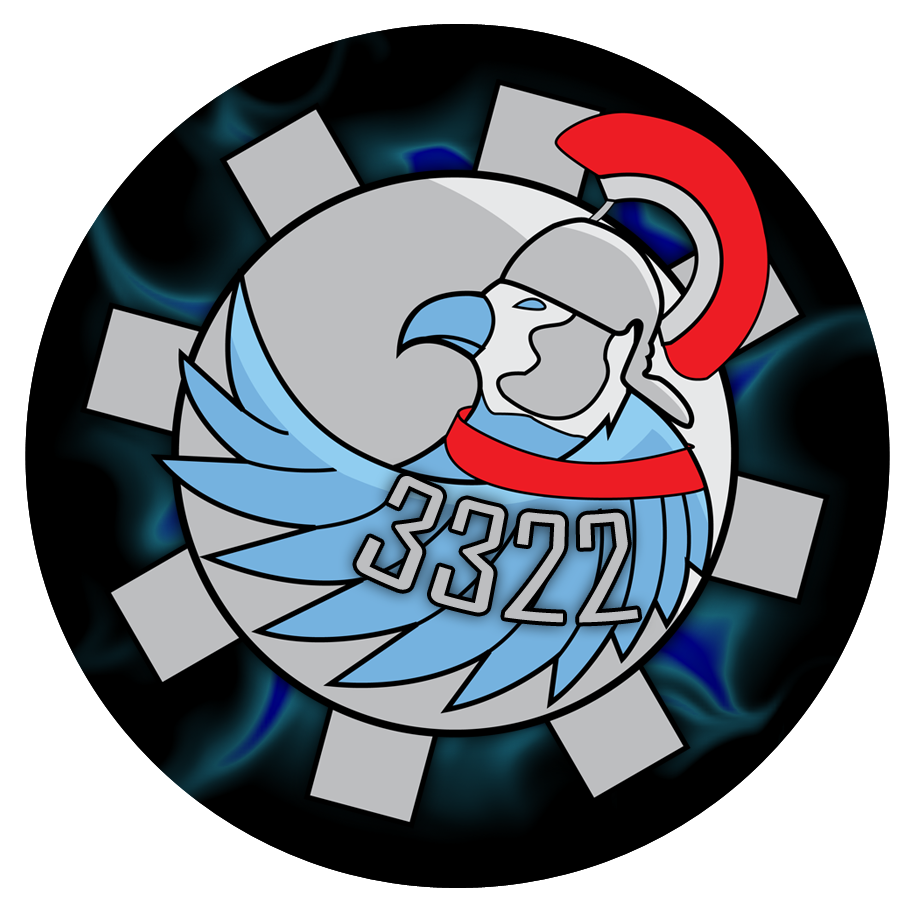
<style>
.page{position:relative;width:900px;height:900px;background:#ffffff}
.page>*{position:absolute;margin:0}
.t1{font:140.3px "AgencyFB-Reg";color:#bdbec0}
</style>
<div class="page">
<p class="t1" style="left:356px;top:476px;width:283px;height:147px;rotate:10deg">3322</p>
</div>
